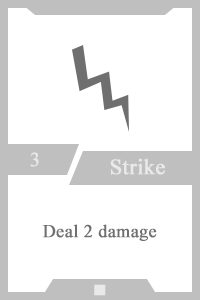
<style>
.page{position:relative;width:200px;height:300px;background:#ffffff}
.page>*{position:absolute;margin:0}
.t1{font:20px "TimesNewRomanPSMT";color:#e9e9e9;font-weight:bold}
.t2{font:22px "TimesNewRomanPSMT";color:#e9e9e9;font-weight:bold}
.t3{font:18px "TimesNewRomanPSMT";color:#6f6f6f;font-weight:bold}
.t4{font:14px "AdobeHeitiStd-Regular";color:#e9e9e9;font-weight:bold}
</style>
<div class="page">
<p class="t1" style="left:30px;top:152px;width:9px;height:15px">3</p>
<p class="t2" style="left:110px;top:158px;width:55px;height:17px">Strike</p>
<p class="t3" style="left:42px;top:224px;width:115px;height:17px">Deal 2 damage</p>
<p class="t4" style="left:94px;top:284px;width:12px;height:12px">■</p>
</div>
